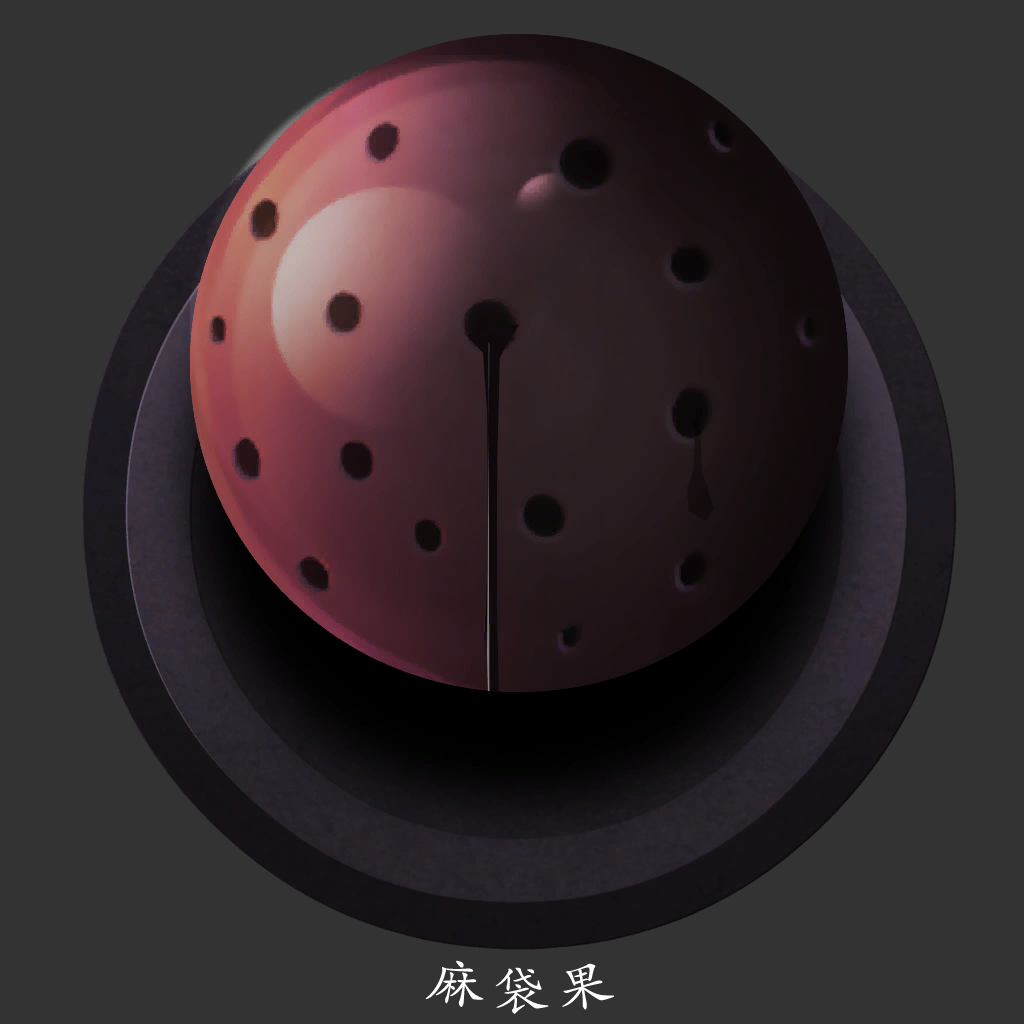
<style>
.page{position:relative;width:1024px;height:1024px;background:#333333}
.page>*{position:absolute;margin:0}
.t1{font:53.3px "STKaiti";letter-spacing:0.1em;color:#ffffff}
</style>
<div class="page">
<p class="t1" style="left:425px;top:960px;width:189px;height:54px">麻袋果</p>
</div>
